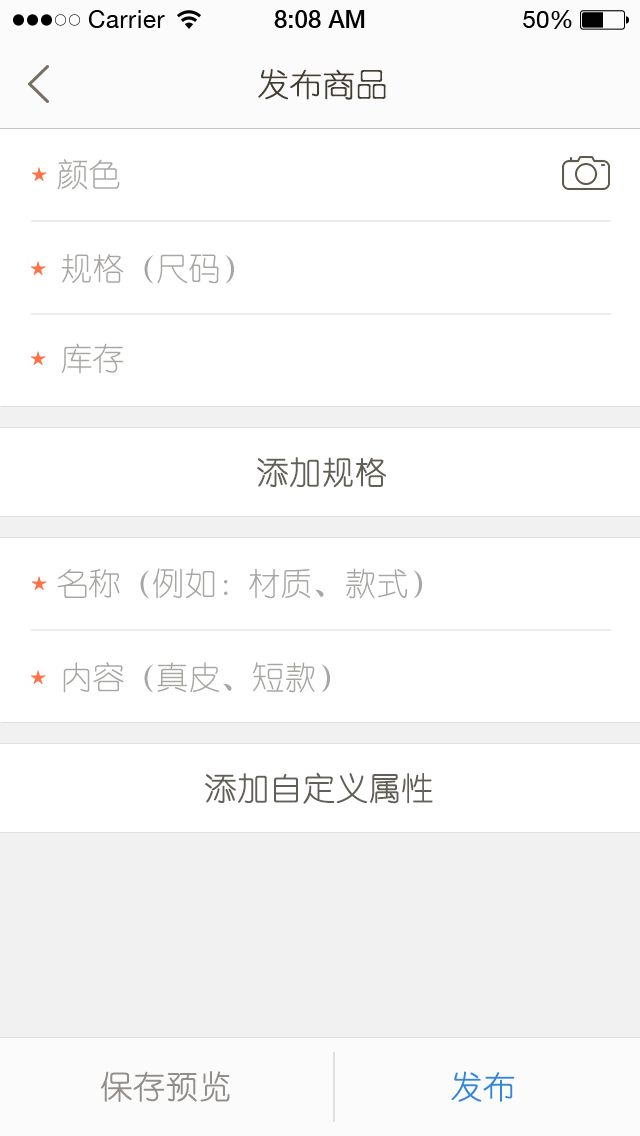
<style>
.page{position:relative;width:640px;height:1136px;background:#ffffff}
.page>*{position:absolute;margin:0}
.t1{font:32px "YouYuan";color:#433d33;text-transform:uppercase;font-weight:bold}
.t2{font:32px "YouYuan";color:#a7a6a3;text-transform:uppercase}
.t3{font:32px "YouYuan";color:#625e58;text-transform:uppercase;font-weight:bold}
.t4{font:32px "YouYuan";color:#918e8a;text-transform:uppercase;font-weight:bold}
.t5{font:32px "YouYuan";color:#2f88da;text-transform:uppercase;font-weight:bold}
</style>
<div class="page">
<p class="t1" style="left:258px;top:69px;width:128px;height:31px">发布商品</p>
<p class="t2" style="left:57px;top:159px;width:63px;height:31px">颜色</p>
<p class="t2" style="left:61px;top:254px;width:173px;height:30px">规格（尺码）</p>
<p class="t2" style="left:61px;top:343px;width:63px;height:31px">库存</p>
<p class="t3" style="left:257px;top:457px;width:129px;height:31px">添加规格</p>
<p class="t2" style="left:57px;top:568px;width:365px;height:31px">名称（例如：材质、款式）</p>
<p class="t2" style="left:63px;top:662px;width:267px;height:31px">内容（真皮、短款）</p>
<p class="t3" style="left:205px;top:772px;width:228px;height:32px">添加自定义属性</p>
<p class="t4" style="left:101px;top:1071px;width:129px;height:31px">保存预览</p>
<p class="t5" style="left:451px;top:1071px;width:64px;height:31px">发布</p>
</div>
